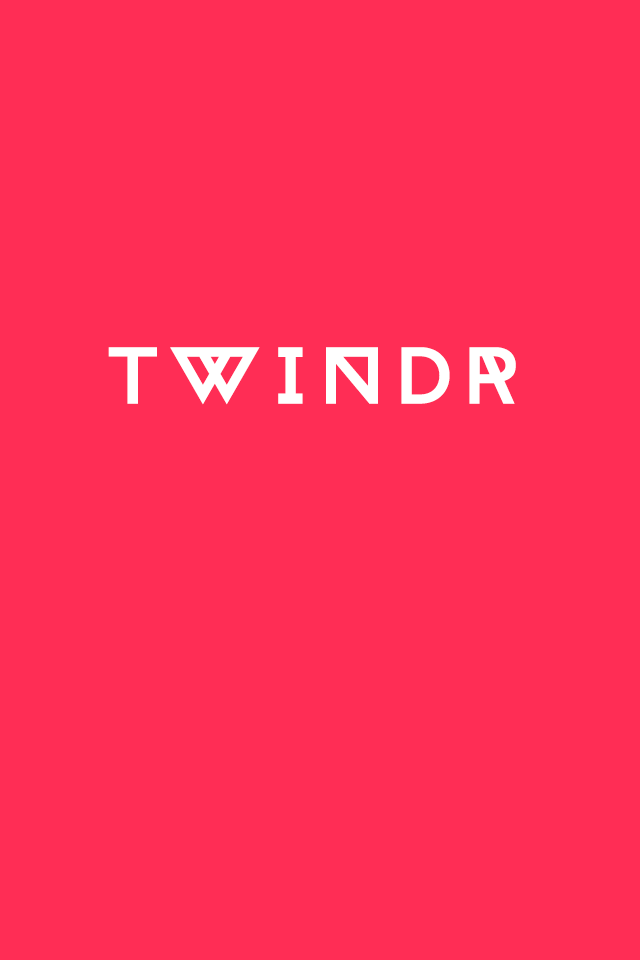
<style>
.page{position:relative;width:640px;height:960px;background:#ff2d55}
.page>*{position:absolute;margin:0}
.t1{font:80.4px "AttitudeRegular";color:#ffffff}
</style>
<div class="page">
<p class="t1" style="left:108px;top:347px;width:408px;height:58px">twindr</p>
</div>
